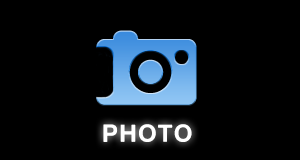
<style>
.page{position:relative;width:300px;height:160px;background:#000000}
.page>*{position:absolute;margin:0}
.t1{font:24px "AlteHaasGrotesk_Bold";letter-spacing:0.05em;color:#ffffff}
</style>
<div class="page">
<p class="t1" style="left:103px;top:124px;width:89px;height:18px">PHOTO</p>
</div>
